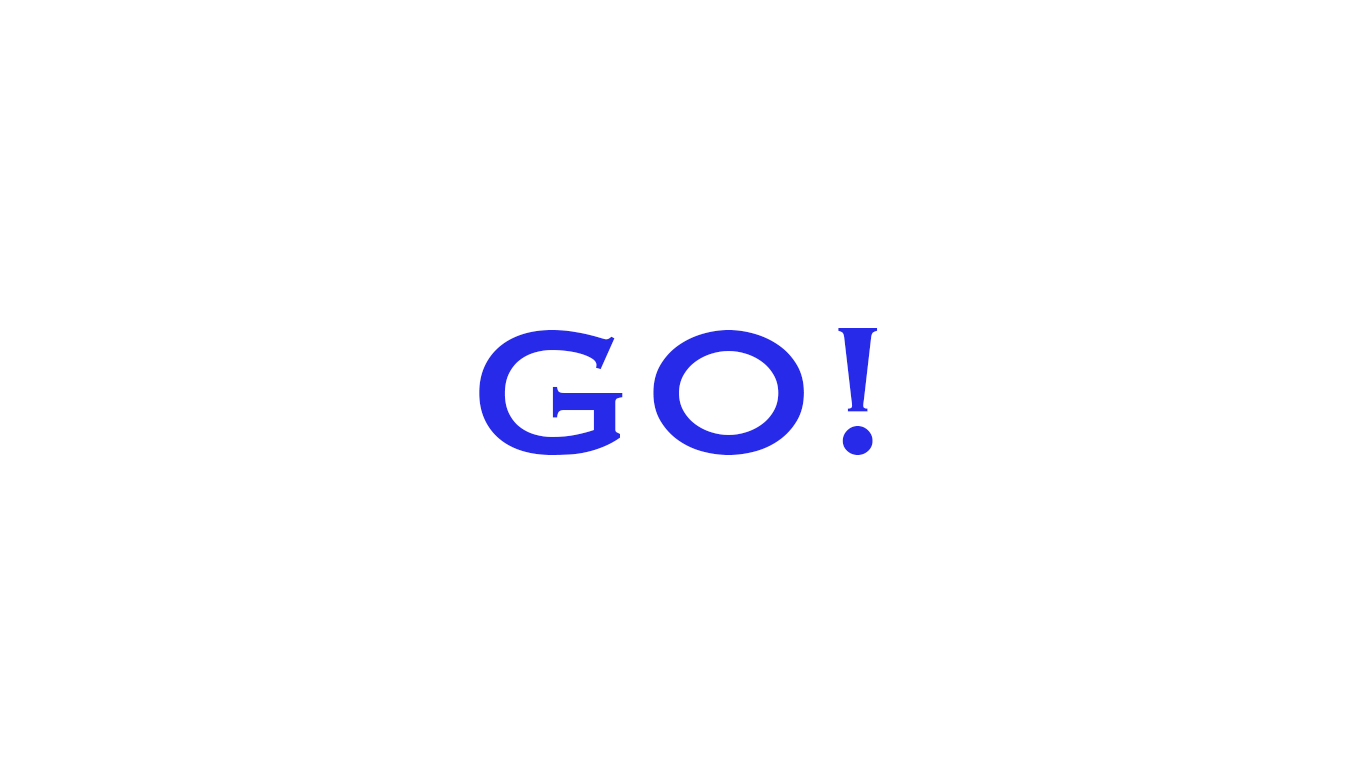
<style>
.page{position:relative;width:1366px;height:768px;background:#ffffff}
.page>*{position:absolute;margin:0}
.t1{font:233.3px "Copperplate";color:#272ae8}
</style>
<div class="page">
<p class="t1" style="left:479px;top:328px;width:399px;height:127px">GO!</p>
</div>
